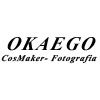
<style>
.page{position:relative;width:100px;height:100px;background:#ffffff}
.page>*{position:absolute;margin:0}
.t1{font:24px "Vijaya-Bold";letter-spacing:0.06em;color:#030303;font-style:italic}
.t2{font:11px "Vijaya-Bold";letter-spacing:0.06em;color:#030303;font-style:italic}
</style>
<div class="page">
<p class="t1" style="left:7px;top:37px;width:89px;height:14px">OKAEGO</p>
<p class="t2" style="left:1px;top:54px;width:96px;height:10px">CosMaker- Fotografia</p>
</div>
